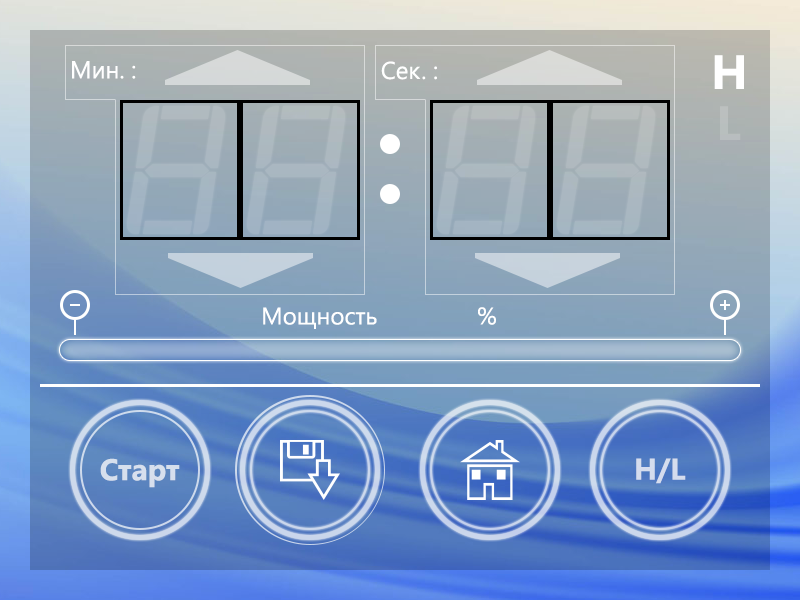
<style>
.page{position:relative;width:800px;height:600px}
.page>*{position:absolute;margin:0}
.t1{font:24.4px "SegoeUI";color:#ffffff}
.t2{font:48px "SegoeUI-Bold";color:#ffffff}
.t3{font:48px "SegoeUI-Bold";color:#b8bfbf}
.t4{font:24px "SegoeUI";color:#ffffff}
.t5{font:30px "SegoeUI-Bold";color:#d7dfed}
.t6{font:30px "SegoeUI-Bold";color:#d5dcee}
</style>
<div class="page">
<p class="t1" style="left:72px;top:61px;width:64px;height:18px">Мин. :</p>
<p class="t1" style="left:381px;top:61px;width:56px;height:19px">Сек. :</p>
<p class="t2" style="left:714px;top:55px;width:30px;height:34px;opacity:0.15">H</p>
<p class="t2" style="left:714px;top:55px;width:30px;height:34px">H</p>
<p class="t3" style="left:720px;top:106px;width:21px;height:34px">L</p>
<p class="t4" style="left:263px;top:307px;width:233px;height:22px">Мощность    %</p>
<p class="t5" style="left:100px;top:458px;width:80px;height:30px">Старт</p>
<p class="t6" style="left:636px;top:458px;width:50px;height:26px">H/L</p>
</div>
